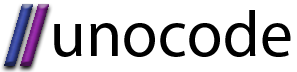
<style>
.page{position:relative;width:297px;height:72px;background:#ffffff}
.page>*{position:absolute;margin:0}
.t1{font:65.4px "MyriadPro-Regular";color:#000000}
</style>
<div class="page">
<p class="t1" style="left:54px;top:10px;width:237px;height:47px">unocode</p>
</div>
